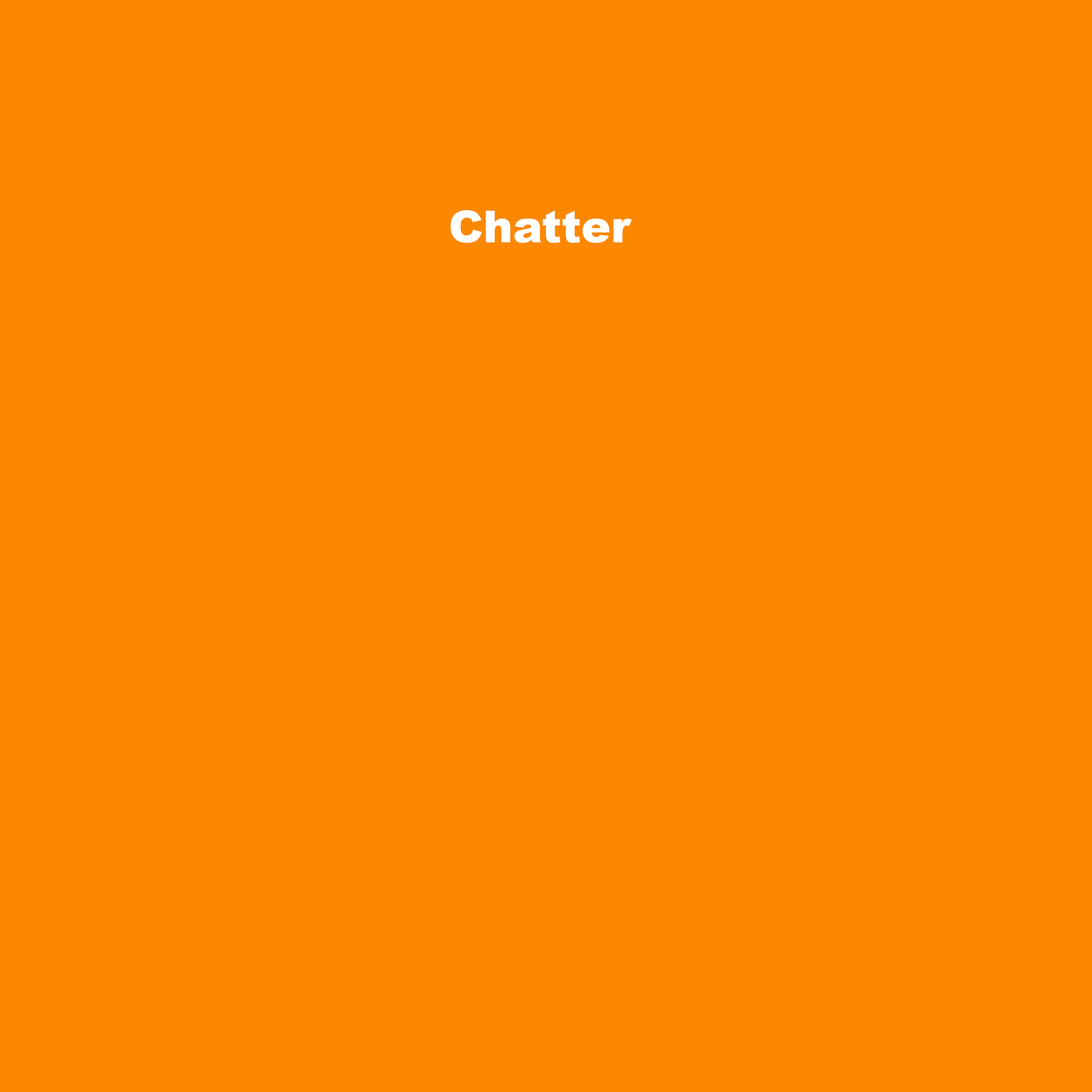
<style>
.page{position:relative;width:1092px;height:1092px;background:#fc8800}
.page>*{position:absolute;margin:0}
.t1{font:44.5px "Arial-Black";color:#ffffff}
</style>
<div class="page">
<p class="t1" style="left:451px;top:210px;width:181px;height:33px">Chatter</p>
</div>
